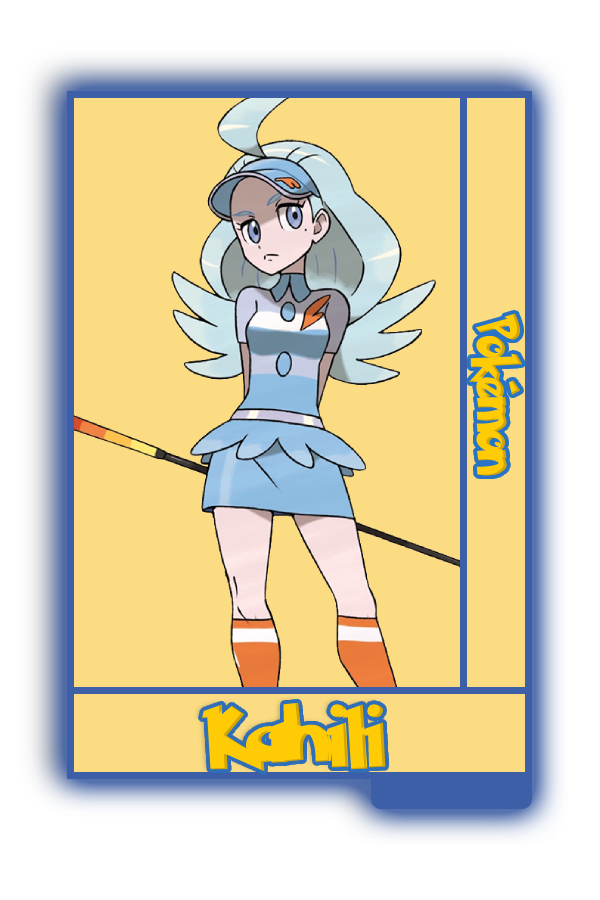
<style>
.page{position:relative;width:600px;height:900px;background:#fbdc83}
.page>*{position:absolute;margin:0}
.t1{font:48.8px "PokemonSolidNormal";color:#ffcb05;scale:0.8 1}
.t2{font:61.4px "PokemonSolidNormal";color:#ffcb05;scale:1.21 1}
</style>
<div class="page">
<p class="t1" style="left:469px;top:313px;width:54px;height:163px;rotate:90deg">Pokémon</p>
<p class="t2" style="left:202px;top:702px;width:184px;height:70px">Kahili</p>
</div>
